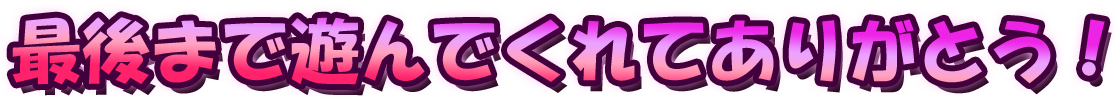
<style>
.page{position:relative;width:1120px;height:101px;background:#42003d}
.page>*{position:absolute;margin:0}
.t1{font:69.7px "HGSoeiKakupoptai"}
</style>
<div class="page">
<p class="t1" style="left:12px;top:17px;width:1093px;height:68px">最後まで遊んでくれてありがとう！</p>
</div>
